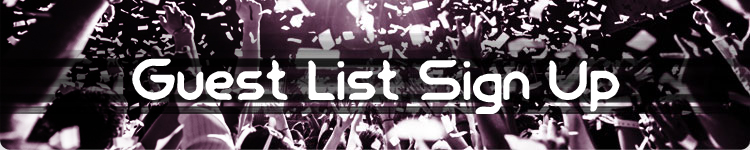
<style>
.page{position:relative;width:750px;height:150px}
.page>*{position:absolute;margin:0}
.t1{font:72px "2006";color:#ffffff}
</style>
<div class="page">
<p class="t1" style="left:132px;top:58px;width:488px;height:56px">Guest List Sign Up</p>
</div>
